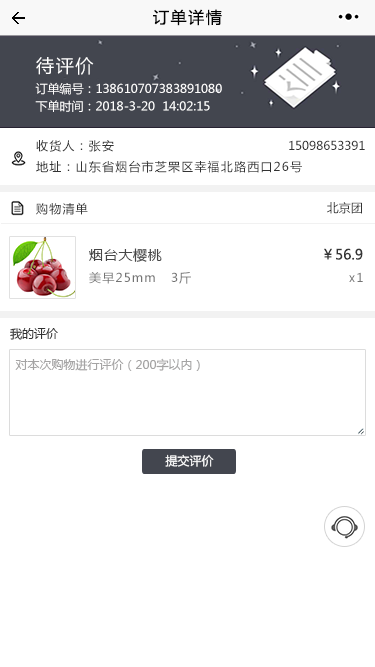
<style>
.page{position:relative;width:375px;height:667px;background:#ffffff}
.page>*{position:absolute;margin:0}
.t1{font:16px "MicrosoftYaHei";letter-spacing:0.1em;color:#020202}
.t2{font:18px "MicrosoftYaHei";letter-spacing:0.1em;color:#ffffff}
.t3{font:12px "MicrosoftYaHei";color:#fffefe}
.t4{font:12px "MicrosoftYaHei";color:#ffffff}
.t5{font:12px "MicrosoftYaHei";letter-spacing:0.1em;color:#333333}
.t6{font:12px "MicrosoftYaHei";color:#333333}
.t7{font:14px "MicrosoftYaHei";letter-spacing:0.05em;color:#454545}
.t8{font:14px "MicrosoftYaHei";color:#363636}
.t9{font:12px "MicrosoftYaHei";letter-spacing:0.1em;color:#747474}
.t10{font:12px "MicrosoftYaHei";color:#a5a4a4}
</style>
<div class="page">
<p class="t1" style="left:153px;top:9px;width:69px;height:17px">订单详情</p>
<p class="t2" style="left:36px;top:57px;width:58px;height:18px">待评价</p>
<p class="t3" style="left:35px;top:82px;width:187px;height:13px">订单编号：138610707383891080</p>
<p class="t4" style="left:35px;top:100px;width:175px;height:12px">下单时间：2018-3-20  14:02:15</p>
<p class="t5" style="left:36px;top:140px;width:78px;height:12px">收货人：张安</p>
<p class="t6" style="left:289px;top:140px;width:76px;height:10px">15098653391</p>
<p class="t5" style="left:36px;top:160px;width:266px;height:13px">地址：山东省烟台市芝罘区幸福北路西口26号</p>
<p class="t5" style="left:36px;top:202px;width:52px;height:13px">购物清单</p>
<p class="t6" style="left:327px;top:202px;width:35px;height:12px">北京团</p>
<p class="t7" style="left:89px;top:248px;width:73px;height:14px">烟台大樱桃</p>
<p class="t8" style="left:324px;top:248px;width:39px;height:12px">￥56.9</p>
<p class="t9" style="left:89px;top:272px;width:102px;height:12px">美早25mm   3斤</p>
<p class="t9" style="left:349px;top:272px;width:14px;height:10px">x1</p>
<p class="t6" style="left:10px;top:328px;width:48px;height:12px">我的评价</p>
<p class="t10" style="left:15px;top:358px;width:185px;height:13px">对本次购物进行评价（200字以内）</p>
<p class="t4" style="left:165px;top:454px;width:49px;height:13px">提交评价</p>
</div>
